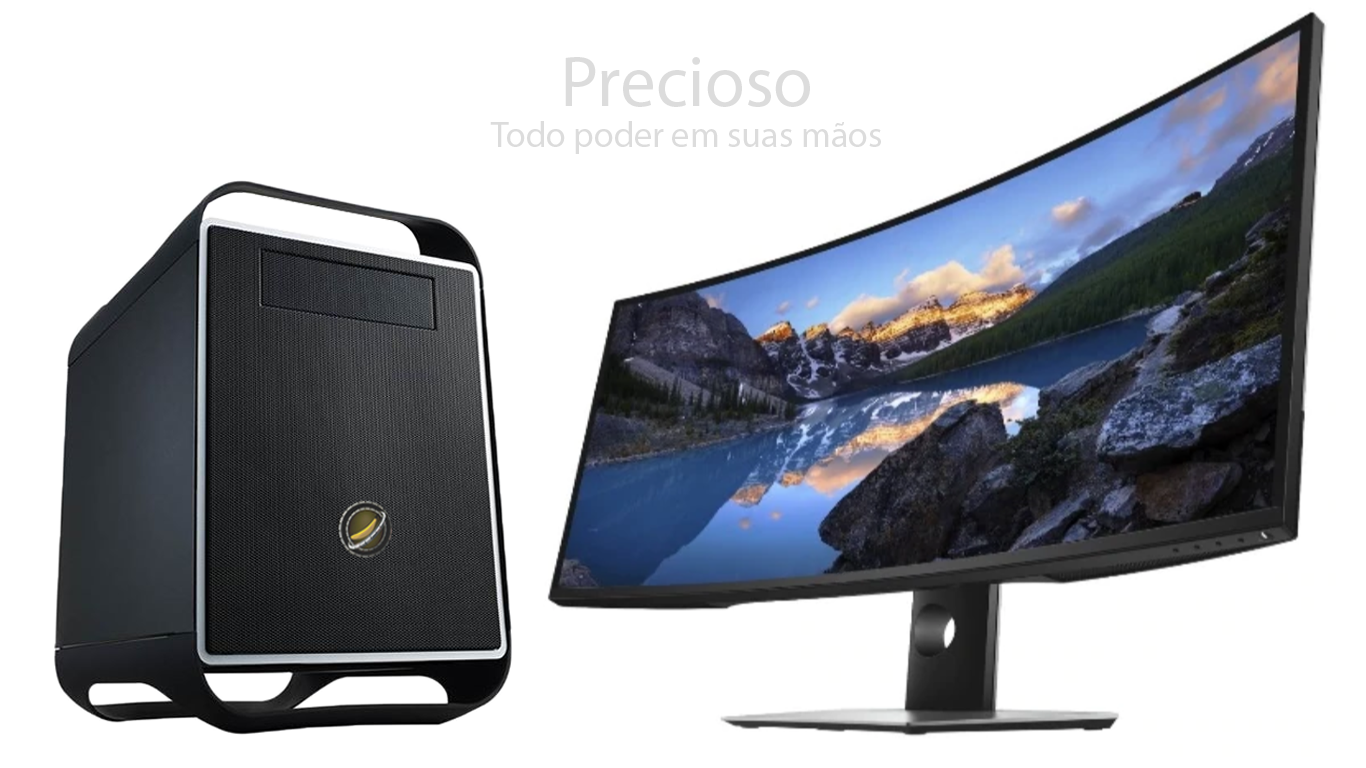
<style>
.page{position:relative;width:1366px;height:768px;background:#ffffff}
.page>*{position:absolute;margin:0}
.t1{font:72px "MyriadPro-Regular";color:#dcdcdc}
.t2{font:36px "MyriadPro-Regular";color:#dcdcdc}
</style>
<div class="page">
<p class="t1" style="left:565px;top:57px;width:245px;height:50px">Precioso</p>
<p class="t2" style="left:490px;top:121px;width:391px;height:33px">Todo poder em suas mãos</p>
</div>
